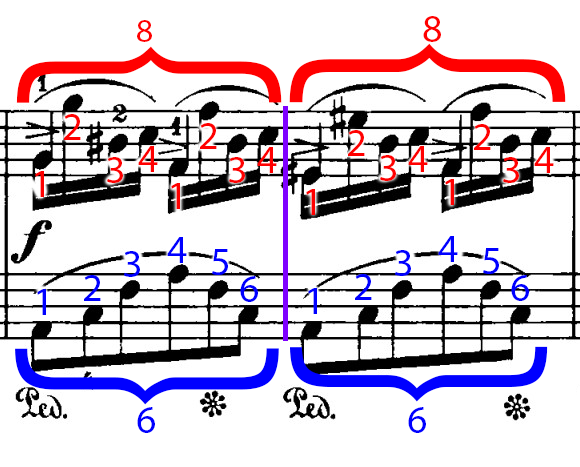
<style>
.page{position:relative;width:580px;height:467px;background:#ffffff}
.page>*{position:absolute;margin:0}
.t1{font:40px "MyriadPro-Regular";color:#ff0000}
.t2{font:32.9px "MyriadPro-Regular";color:#ff0000}
.t3{font:330px "GeosansLight";color:#ff0000}
.t4{font:343.9px "GeosansLight";color:#ff0000}
.t5{font:40px "MyriadPro-Regular";color:#0000ff}
.t6{font:329.4px "GeosansLight";color:#0000ff}
.t7{font:320.9px "GeosansLight";color:#0000ff}
</style>
<div class="page">
<p class="t1" style="left:423px;top:16px;width:18px;height:26px">8</p>
<p class="t2" style="left:137px;top:20px;width:15px;height:22px">8</p>
<p class="t3" style="left:16px;top:46px;width:266px;height:57px;rotate:90deg">{</p>
<p class="t4" style="left:289px;top:43px;width:277px;height:60px;rotate:90deg">{</p>
<p class="t1" style="left:64px;top:114px;width:17px;height:26px">2</p>
<p class="t1" style="left:200px;top:123px;width:17px;height:26px">2</p>
<p class="t1" style="left:474px;top:124px;width:17px;height:26px">2</p>
<p class="t1" style="left:348px;top:130px;width:17px;height:26px">2</p>
<p class="t1" style="left:138px;top:146px;width:20px;height:26px">4</p>
<p class="t1" style="left:257px;top:147px;width:20px;height:26px">4</p>
<p class="t1" style="left:408px;top:146px;width:20px;height:26px">4</p>
<p class="t1" style="left:534px;top:147px;width:20px;height:26px">4</p>
<p class="t1" style="left:107px;top:157px;width:16px;height:26px">3</p>
<p class="t1" style="left:229px;top:157px;width:16px;height:26px">3</p>
<p class="t1" style="left:380px;top:155px;width:16px;height:26px">3</p>
<p class="t1" style="left:503px;top:157px;width:16px;height:26px">3</p>
<p class="t1" style="left:35px;top:171px;width:9px;height:26px">1</p>
<p class="t1" style="left:171px;top:183px;width:9px;height:26px">1</p>
<p class="t1" style="left:445px;top:179px;width:9px;height:26px">1</p>
<p class="t1" style="left:306px;top:189px;width:9px;height:26px">1</p>
<p class="t5" style="left:167px;top:237px;width:20px;height:26px">4</p>
<p class="t5" style="left:438px;top:236px;width:20px;height:26px">4</p>
<p class="t5" style="left:124px;top:251px;width:16px;height:26px">3</p>
<p class="t5" style="left:212px;top:249px;width:16px;height:26px">5</p>
<p class="t5" style="left:395px;top:250px;width:16px;height:26px">3</p>
<p class="t5" style="left:483px;top:248px;width:16px;height:26px">5</p>
<p class="t5" style="left:84px;top:275px;width:17px;height:26px">2</p>
<p class="t5" style="left:240px;top:276px;width:18px;height:26px">6</p>
<p class="t5" style="left:355px;top:274px;width:17px;height:26px">2</p>
<p class="t5" style="left:511px;top:275px;width:18px;height:26px">6</p>
<p class="t5" style="left:37px;top:289px;width:9px;height:26px">1</p>
<p class="t5" style="left:308px;top:288px;width:9px;height:26px">1</p>
<p class="t6" style="left:15px;top:348px;width:264px;height:57px;rotate:-90deg">{</p>
<p class="t7" style="left:290px;top:346px;width:258px;height:56px;rotate:-90deg">{</p>
<p class="t5" style="left:137px;top:407px;width:18px;height:26px">6</p>
<p class="t5" style="left:408px;top:407px;width:18px;height:26px">6</p>
</div>
